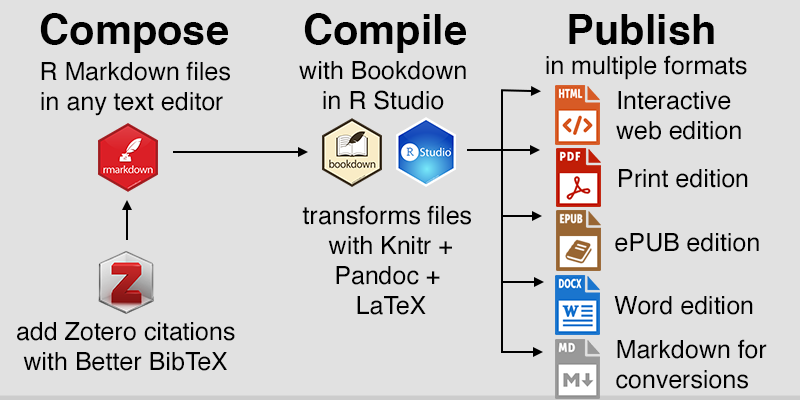
<style>
.page{position:relative;width:800px;height:400px;background:#e1e1e1}
.page>*{position:absolute;margin:0}
.t1{font:41.7px "Helvetica-Bold";color:#000000}
.t2{font:25px "Helvetica";color:#000000}
</style>
<div class="page">
<p class="t1" style="left:40px;top:13px;width:674px;height:40px">Compose   Compile     Publish</p>
<p class="t2" style="left:41px;top:61px;width:189px;height:55px;text-align:center">R Markdown files<br>in any text editor</p>
<p class="t2" style="left:299px;top:61px;width:167px;height:49px;text-align:center">with Bookdown<br>in R Studio</p>
<p class="t2" style="left:546px;top:55px;width:201px;height:25px">in multiple formats</p>
<p class="t2" style="left:616px;top:91px;width:125px;height:49px">Interactive <br>web edition</p>
<p class="t2" style="left:619px;top:169px;width:129px;height:19px">Print edition</p>
<p class="t2" style="left:302px;top:205px;width:169px;height:110px;text-align:center">transforms files <br>with Knitr +<br>Pandoc + <br>LaTeX</p>
<p class="t2" style="left:615px;top:233px;width:144px;height:19px">ePUB edition</p>
<p class="t2" style="left:614px;top:296px;width:139px;height:19px">Word edition</p>
<p class="t2" style="left:17px;top:322px;width:218px;height:49px;text-align:center">add Zotero citations<br>with Better BibTeX</p>
<p class="t2" style="left:616px;top:339px;width:151px;height:50px">Markdown for<br>conversions</p>
</div>
